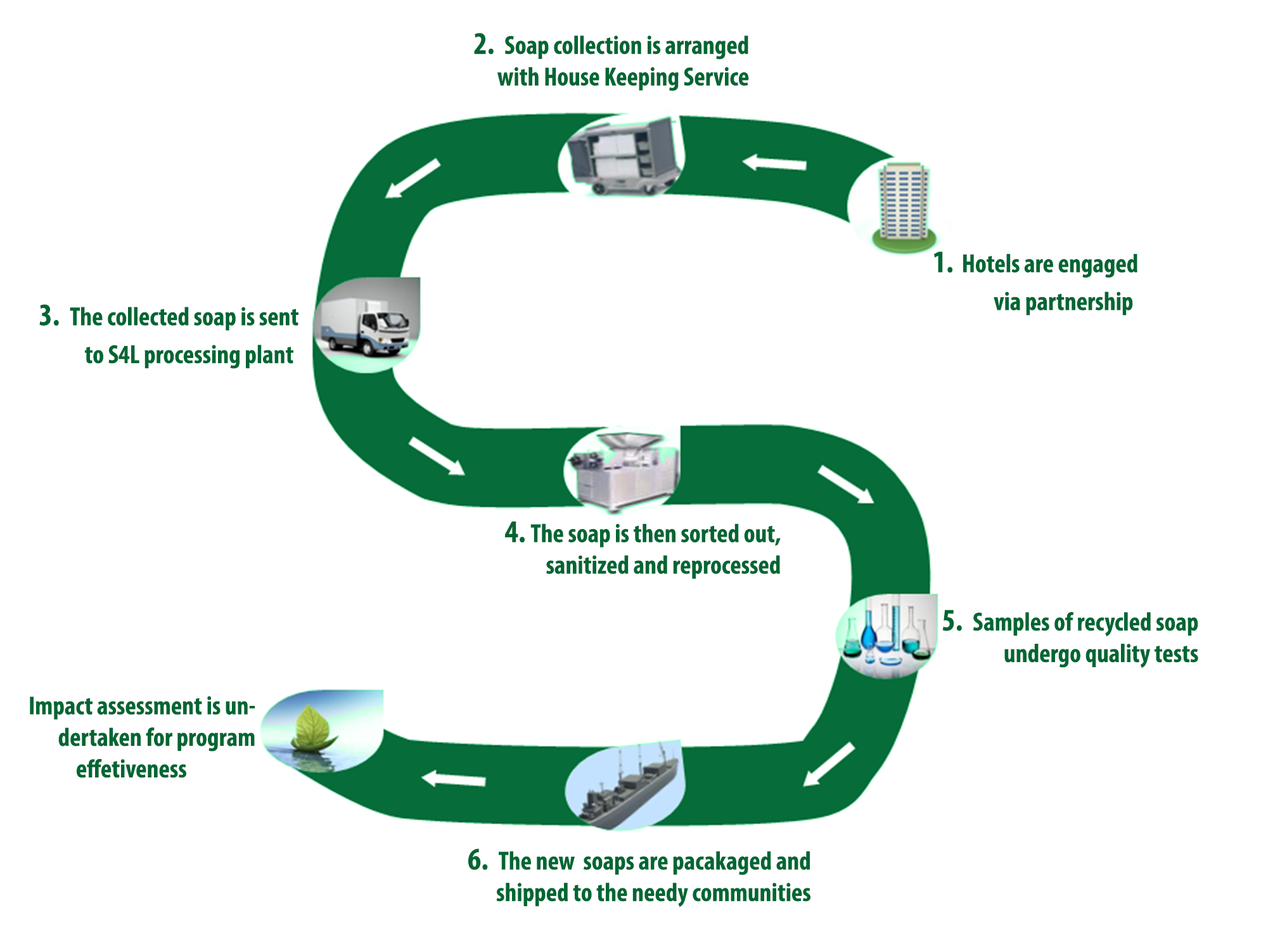
<style>
.page{position:relative;width:1261px;height:946px;background:#ffffff}
.page>*{position:absolute;margin:0}
.t1{font:26.3px "MyriadPro-BoldCond";color:#006633}
.t2{font:31.5px "MyriadPro-BoldCond";color:#006633}
</style>
<div class="page">
<p class="t1" style="left:474px;top:33px;width:275px;height:58px;text-align:right"><span class="t2">2.  </span>Soap collection is arranged <br>with House Keeping Service</p>
<p class="t1" style="left:934px;top:252px;width:203px;height:63px;text-align:right"><span class="t2">1.</span>  Hotels are engaged<br>via partnership</p>
<p class="t1" style="left:39px;top:304px;width:259px;height:65px;text-align:right"><span class="t2">3.  </span>The collected soap is sent<br> to S4L processing plant</p>
<p class="t1" style="left:505px;top:521px;width:275px;height:58px;text-align:right"><span class="t2">4. </span>The soap is then sorted out,<br>sanitized and reprocessed</p>
<p class="t1" style="left:942px;top:609px;width:256px;height:59px;text-align:right"><span class="t2">5.  </span>Samples of recycled soap <br>undergo quality tests</p>
<p class="t1" style="left:30px;top:696px;width:225px;height:82px;text-align:right">Impact assessment is undertaken for program <br>effetiveness</p>
<p class="t1" style="left:468px;top:848px;width:342px;height:59px;text-align:right"><span class="t2">6.  </span>The new  soaps are pacakaged and <br>shipped to the needy communities</p>
</div>
